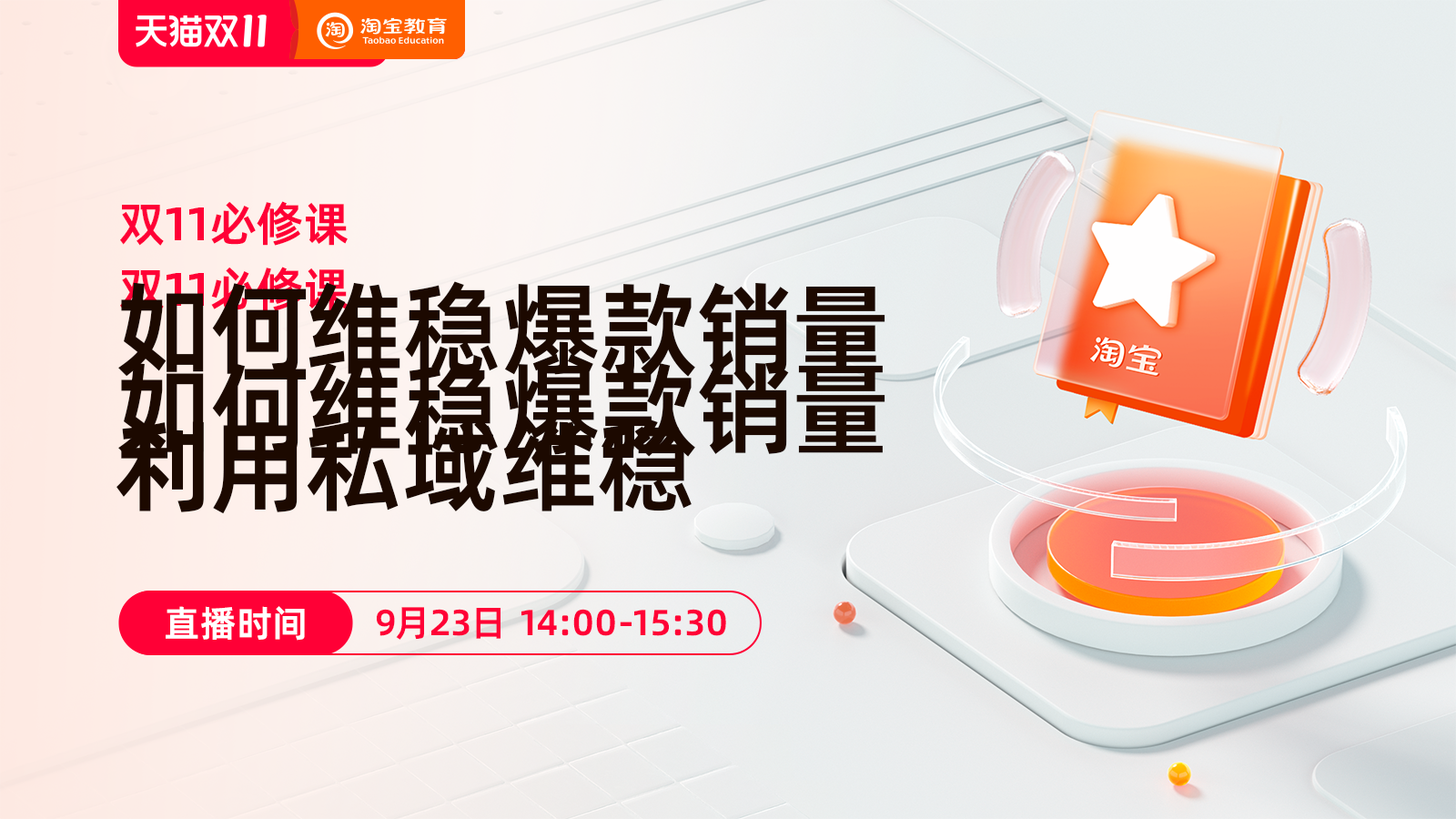
<style>
.page{position:relative;width:1456px;height:819px}
.page>*{position:absolute;margin:0}
.t1{font:47.3px "AlibabaPuHuiTi_2_85_Bold";color:#ff0036}
.t2{font:100.1px "AlibabaPuHuiTi_2_85_Bold";color:#1c0900}
.t3{font:36.4px "AlibabaPuHuiTi_2_85_Bold";letter-spacing:0.02em;color:#ffffff}
.t4{font:36.4px "AlibabaPuHuiTi_2_85_Bold";letter-spacing:0.02em;color:#ff0036}
</style>
<div class="page">
<p class="t1" style="left:120px;top:201px;width:228px;height:45px">双11必修课</p>
<p class="t1" style="left:120px;top:267px;width:228px;height:44px">双11必修课</p>
<p class="t2" style="left:118px;top:281px;width:767px;height:96px">如何维稳爆款销量</p>
<p class="t2" style="left:118px;top:361px;width:767px;height:96px">如何维稳爆款销量</p>
<p class="t2" style="left:116px;top:418px;width:576px;height:96px">利用私域维稳</p>
<p class="t3" style="left:166px;top:606px;width:139px;height:35px">直播时间</p>
<p class="t4" style="left:377px;top:607px;width:349px;height:33px">9月23日 14:00-15:30</p>
</div>
